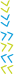
<style>
.page{position:relative;width:14px;height:75px;background:#ffffff}
.page>*{position:absolute;margin:0}
.t1{font:16px "ThrowMyHandsUpintheAir";color:#c8d529;text-transform:uppercase}
.t2{font:16px "ThrowMyHandsUpintheAir";color:#16a2dd;text-transform:uppercase}
</style>
<div class="page">
<p class="t1" style="left:0px;top:0px;width:10px;height:13px;rotate:90deg">&gt;&gt;</p>
<p class="t2" style="left:0px;top:14px;width:10px;height:13px;rotate:90deg">&gt;&gt;</p>
<p class="t2" style="left:0px;top:31px;width:14px;height:10px">&gt;&gt;</p>
<p class="t2" style="left:0px;top:54px;width:14px;height:9px;rotate:-180deg">&gt;&gt;</p>
<p class="t1" style="left:0px;top:42px;width:14px;height:10px">&gt;&gt;</p>
<p class="t1" style="left:0px;top:65px;width:14px;height:9px;rotate:-180deg">&gt;&gt;</p>
</div>
